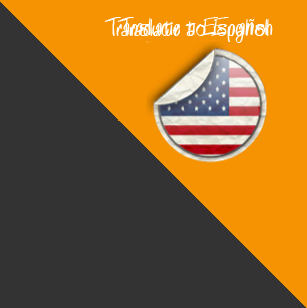
<style>
.page{position:relative;width:307px;height:308px;background:#333333}
.page>*{position:absolute;margin:0}
.t1{font:30.7px "AceBinghamSH";color:#ffffff}
.t2{font:24px "MyriadPro-CondIt";color:#ffffff}
</style>
<div class="page">
<p class="t1" style="left:104px;top:17px;width:169px;height:26px">Translate to English</p>
<p class="t1" style="left:117px;top:17px;width:152px;height:25px">Traducir a Espa<span class="t2">ñ</span>ol</p>
</div>
